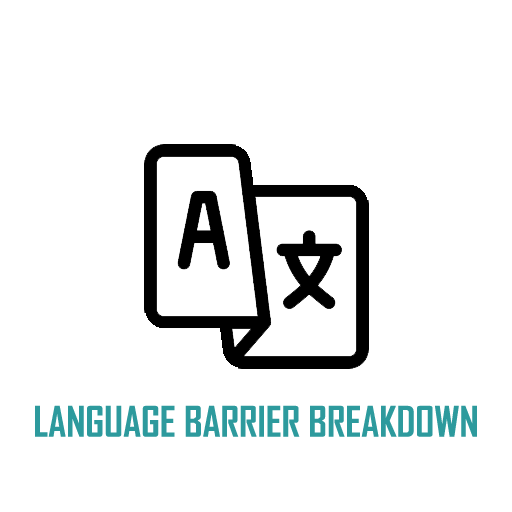
<style>
.page{position:relative;width:512px;height:512px;background:#ffffff}
.page>*{position:absolute;margin:0}
.t1{font:40px "AgencyFB-Bold";color:#2d9a9d}
</style>
<div class="page">
<p class="t1" style="left:35px;top:405px;width:442px;height:32px">LANGUAGE BARRIER BREAKDOWN</p>
</div>
